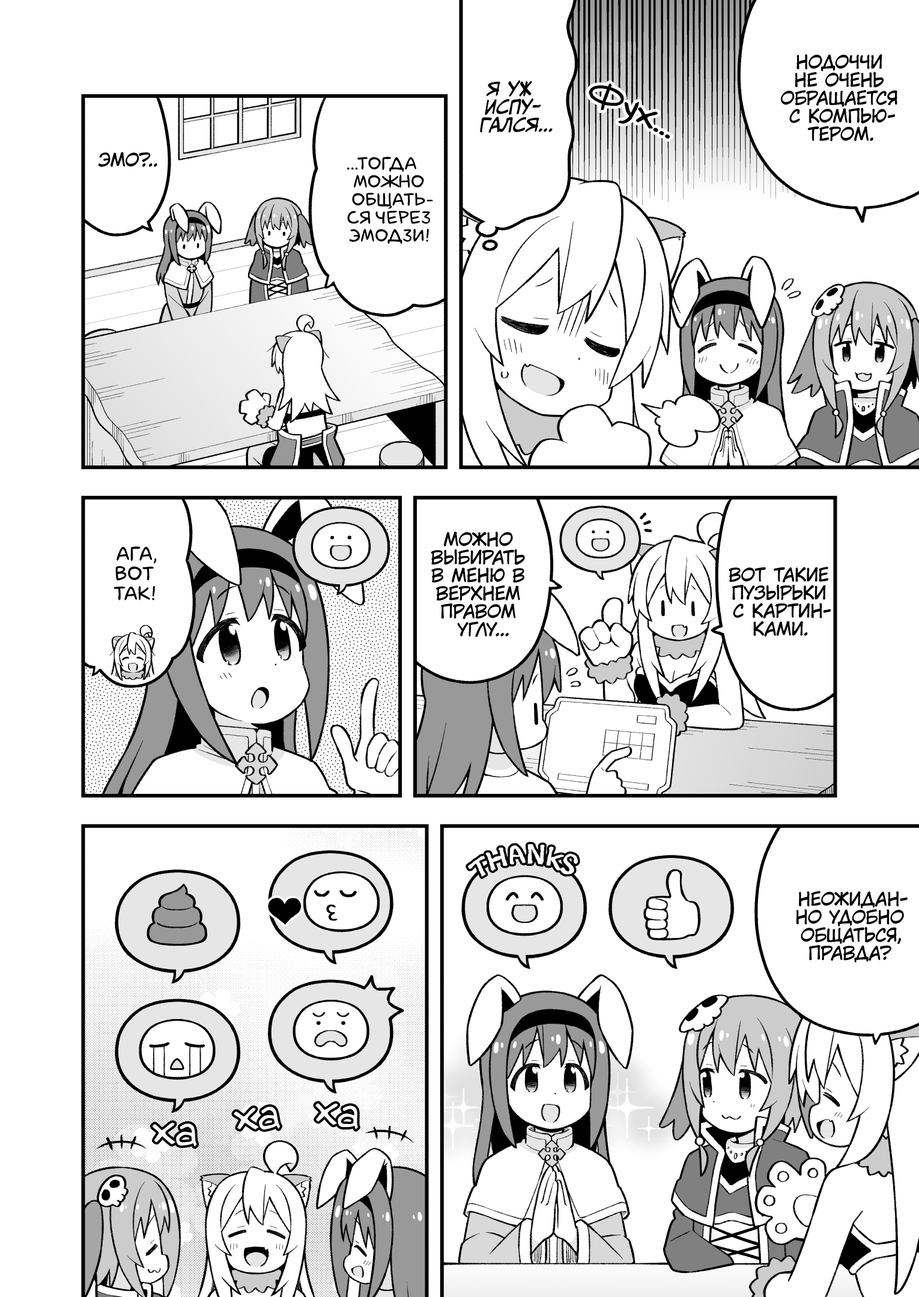
<style>
.page{position:relative;width:919px;height:1297px;background:#ffffff}
.page>*{position:absolute;margin:0}
.t1{font:18px "KuraiVoice2";color:#000000;text-transform:uppercase}
.t2{font:18px "CCMeanwhile";color:#000000;text-transform:uppercase;font-style:italic}
.t3{font:36px "v_Augie";color:#000000}
.t4{font:18px "laCartoonerie";color:#000000;text-transform:uppercase}
.t5{font:19.8px "laCartoonerie";color:#000000;text-transform:uppercase}
.t6{font:43.2px "v_Augie";color:#ffffff}
</style>
<div class="page">
<p class="t1" style="left:781px;top:54px;width:116px;height:87px;text-align:center">Нодоччи<br>не очень<br>обращается<br>с компью-<br>тером.</p>
<p class="t2" style="left:480px;top:80px;width:73px;height:53px;text-align:center">Я уж<br>испу-<br>гался...</p>
<p class="t3" style="left:589px;top:83px;width:81px;height:56px;rotate:22deg">Фух...</p>
<p class="t1" style="left:98px;top:152px;width:59px;height:15px">Эмо?..</p>
<p class="t4" style="left:347px;top:157px;width:86px;height:87px;text-align:center">...Тогда<br>можно<br>общать-<br>ся через<br>эмодзи!</p>
<p class="t1" style="left:431px;top:532px;width:94px;height:105px;text-align:center">Можно<br>выбирать<br>в меню в<br>верхнем<br>правом<br>углу...</p>
<p class="t5" style="left:114px;top:547px;width:43px;height:54px;text-align:center">Ага,<br>вот<br>так!</p>
<p class="t1" style="left:729px;top:567px;width:102px;height:70px;text-align:center">Вот такие<br>пузырьки<br>с картин-<br>ками.</p>
<p class="t1" style="left:796px;top:891px;width:112px;height:72px;text-align:center">Неожидан-<br>но удобно<br>общаться,<br>правда?</p>
<p class="t6" style="left:234px;top:1107px;width:47px;height:23px;rotate:-2deg">ха</p>
<p class="t6" style="left:315px;top:1103px;width:43px;height:27px;rotate:10deg">ха</p>
<p class="t6" style="left:152px;top:1123px;width:45px;height:24px;rotate:5deg">ха</p>
</div>
